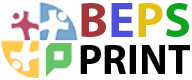
<style>
.page{position:relative;width:192px;height:80px;background:#ffffff}
.page>*{position:absolute;margin:0}
.t1{font:50px "MyriadPro-Bold";color:#a6353a}
.t2{font:50px "MyriadPro-Bold";color:#4d50dd}
.t3{font:50px "MyriadPro-Bold";color:#e5be0f}
.t4{font:50px "MyriadPro-Bold";color:#0da31f}
.t5{font:41.7px "MyriadPro-Bold";color:#000000}
</style>
<div class="page">
<p class="t1" style="left:81px;top:3px;width:108px;height:34px">B<span class="t2">E</span><span class="t3">P</span><span class="t4">S</span></p>
<p class="t5" style="left:80px;top:45px;width:110px;height:29px">PRINT</p>
</div>
